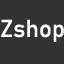
<style>
.page{position:relative;width:64px;height:64px;background:#333333}
.page>*{position:absolute;margin:0}
.t1{font:24px "Bahnschrift";color:#ffffff}
</style>
<div class="page">
<p class="t1" style="left:1px;top:19px;width:63px;height:23px">Zshop</p>
</div>
